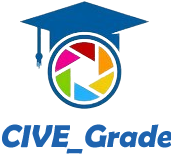
<style>
.page{position:relative;width:171px;height:161px;background:#ffffff}
.page>*{position:absolute;margin:0}
.t1{font:32px "BerlinSansFBDemi-Bold";color:#1e63af;font-style:italic}
</style>
<div class="page">
<p class="t1" style="left:2px;top:124px;width:171px;height:30px">CIVE_Grade</p>
</div>
